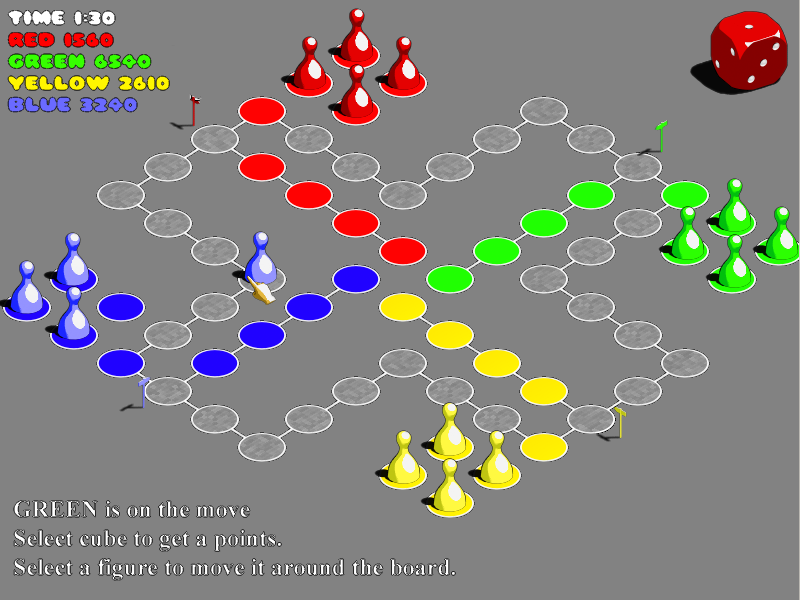
<style>
.page{position:relative;width:800px;height:600px;background:#828282}
.page>*{position:absolute;margin:0}
.t1{font:18px "Pleasantly-Plump";color:#ffffff}
.t2{font:18px "Pleasantly-Plump";color:#fff600}
.t3{font:18px "Pleasantly-Plump";color:#ff0000}
.t4{font:18px "Pleasantly-Plump";color:#36ff00}
.t5{font:18px "Pleasantly-Plump";color:#6a6aff}
.t6{font:24px "TimesNewRomanPS-BoldMT"}
</style>
<div class="page">
<p class="t1" style="left:8px;top:10px;width:107px;height:15px">Time 1:30</p>
<p class="t2" style="left:8px;top:32px;width:162px;height:80px"><span class="t3">RED 1560<br></span><span class="t4">GREEN 6540<br></span>YELLOW 2610<br><span class="t5">BLUE 3240</span></p>
<p class="t6" style="left:14px;top:500px;width:442px;height:81px">GREEN is on the move<br>Select cube to get a points.<br>Select a figure to move it around the board.</p>
</div>
